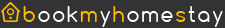
<style>
.page{position:relative;width:225px;height:28px;background:#333333}
.page>*{position:absolute;margin:0}
.t1{font:20px "Comfortaa";letter-spacing:0.11em;color:#ffffff}
.t2{font:20px "Comfortaa";letter-spacing:0.11em;color:#ffbb00}
</style>
<div class="page">
<p class="t1" style="left:23px;top:6px;width:200px;height:21px"><span class="t2">b</span>ook<span class="t2">m</span>y<span class="t2">h</span>ome<span class="t2">s</span>tay</p>
</div>
